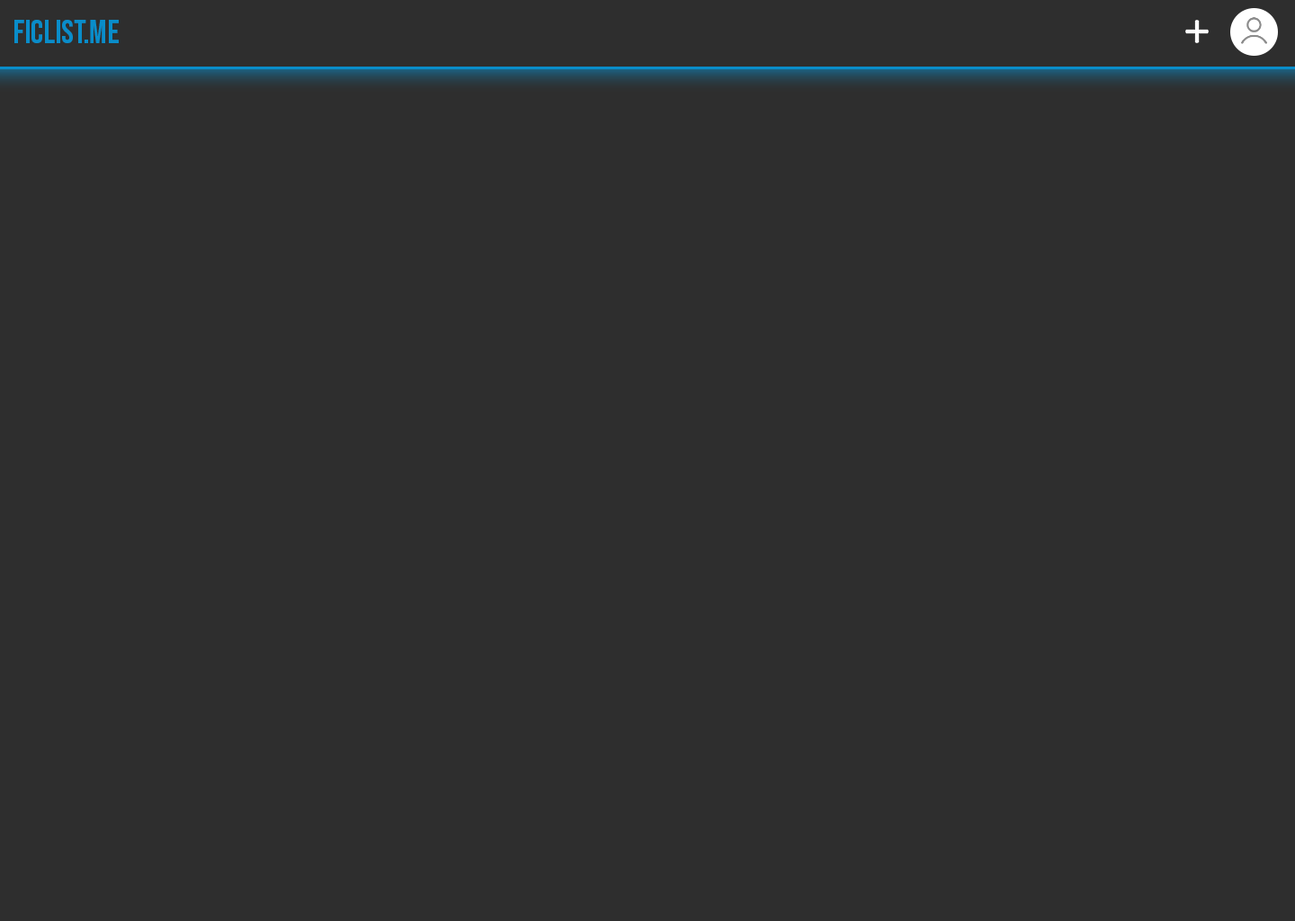
<style>
.page{position:relative;width:1295px;height:921px;background:#2e2e2e}
.page>*{position:absolute;margin:0}
.t1{font:33.1px "BebasNeue-Regular";color:#098dca}
</style>
<div class="page">
<p class="t1" style="left:14px;top:20px;width:105px;height:23px">FICLIST.me</p>
</div>
